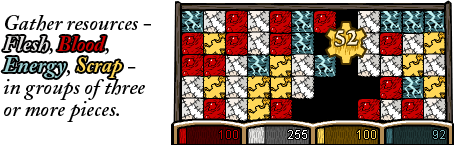
<style>
.page{position:relative;width:454px;height:145px;background:#ffffff}
.page>*{position:absolute;margin:0}
.t1{font:21.5px/21.5px "ACaslonPro-SemiboldItalic"}
.t2{font:21.5px/21.5px "ACaslonPro-BoldItalic"}
</style>
<div class="page">
<p class="t1" style="left:2px;top:15px;width:149px;height:107px">Gather resources - <span class="t2">Flesh, Blood, Energy, Scrap</span> - in groups of three or more pieces.</p>
</div>
